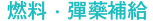
<style>
.page{position:relative;width:153px;height:21px;background:#ffffff}
.page>*{position:absolute;margin:0}
.t1{font:20px "GothicMB101Pr6N-Medium";color:#1cbbbe}
.t2{font:20px "DFKaiShu-SB-Estd-BF";color:#1cbbbe}
</style>
<div class="page">
<p class="t1" style="left:7px;top:0px;width:141px;height:20px">燃料<span class="t2">．</span>彈藥補給</p>
</div>
